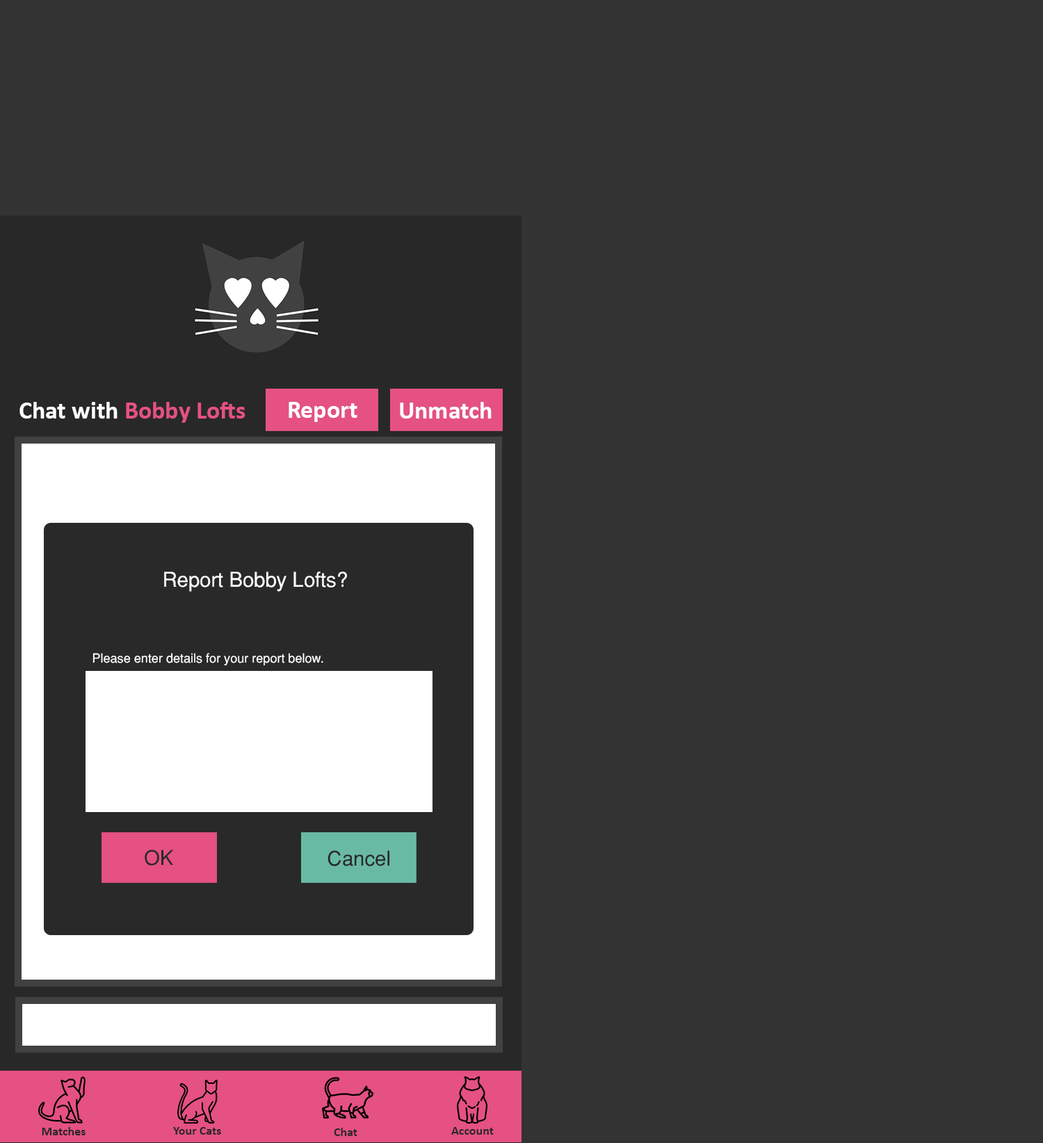
<style>
.page{position:relative;width:1043px;height:1143px;background:#333333}
.page>*{position:absolute;margin:0}
.t1{font:25px "Calibri-Bold";color:#e45182}
.t2{font:25px "Calibri-Bold";color:#ffffff}
.t3{font:20.3px "Helvetica-Normal";color:#ffffff}
.t4{font:12.5px "Helvetica-Normal";color:#ffffff}
.t5{font:20.3px "Helvetica-Normal";color:#292929}
.t6{font:12.5px "Calibri-Bold";color:#282828}
</style>
<div class="page">
<p class="t1" style="left:19px;top:402px;width:226px;height:21px"><span class="t2">Chat with </span>Bobby Lofts</p>
<p class="t2" style="left:289px;top:402px;width:68px;height:20px">Report</p>
<p class="t2" style="left:400px;top:402px;width:92px;height:17px">Unmatch</p>
<p class="t3" style="left:164px;top:572px;width:183px;height:20px">Report Bobby Lofts?</p>
<p class="t4" style="left:92px;top:653px;width:231px;height:12px">Please enter details for your report below.</p>
<p class="t5" style="left:145px;top:850px;width:29px;height:16px">OK</p>
<p class="t5" style="left:328px;top:850px;width:61px;height:16px">Cancel</p>
<p class="t6" style="left:42px;top:1127px;width:44px;height:9px">Matches</p>
<p class="t6" style="left:173px;top:1127px;width:48px;height:8px">Your Cats</p>
<p class="t6" style="left:334px;top:1128px;width:23px;height:8px">Chat</p>
<p class="t6" style="left:451px;top:1127px;width:43px;height:8px">Account</p>
</div>
